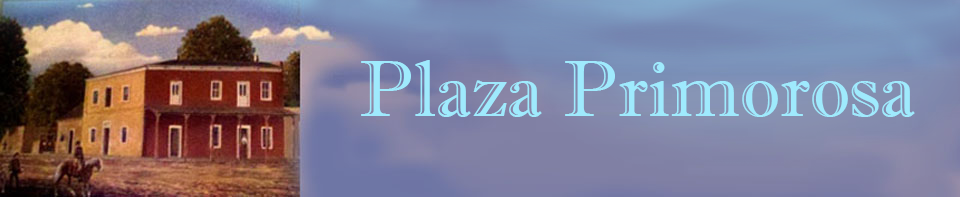
<style>
.page{position:relative;width:960px;height:197px}
.page>*{position:absolute;margin:0}
.t1{font:80px "ImprintMT-Shadow";color:#9feafd}
</style>
<div class="page">
<p class="t1" style="left:361px;top:60px;width:554px;height:57px">Plaza Primorosa</p>
</div>
